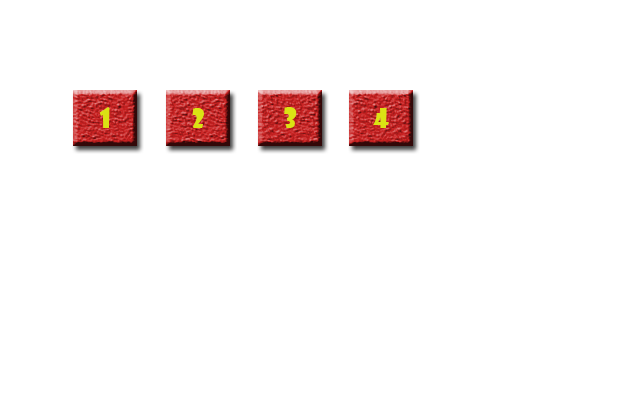
<style>
.page{position:relative;width:640px;height:400px;background:#ffffff}
.page>*{position:absolute;margin:0}
.t1{font:26.7px "ShowcardGothic-Reg";color:#dbe214}
</style>
<div class="page">
<p class="t1" style="left:99px;top:107px;width:11px;height:21px">1</p>
<p class="t1" style="left:192px;top:108px;width:12px;height:20px">2</p>
<p class="t1" style="left:284px;top:107px;width:13px;height:21px">3</p>
<p class="t1" style="left:373px;top:108px;width:16px;height:20px">4</p>
</div>
